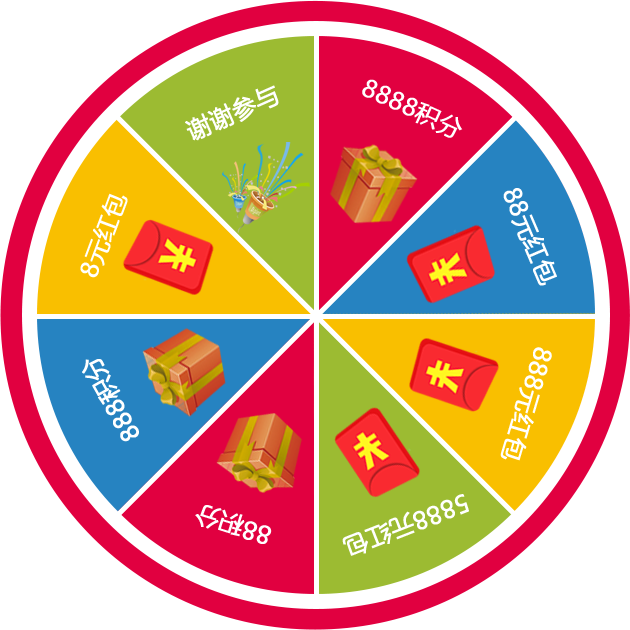
<style>
.page{position:relative;width:630px;height:630px;background:#ffffff}
.page>*{position:absolute;margin:0}
.t1{font:24px "MicrosoftYaHei";color:#ffffff;font-weight:bold}
</style>
<div class="page">
<p class="t1" style="left:185px;top:85px;width:94px;height:56px;rotate:-24deg">谢谢参与</p>
<p class="t1" style="left:362px;top:79px;width:101px;height:59px;rotate:25deg">8888积分</p>
<p class="t1" style="left:80px;top:193px;width:48px;height:85px;rotate:-70deg">8元红包</p>
<p class="t1" style="left:503px;top:188px;width:54px;height:98px;rotate:67deg">88元红包</p>
<p class="t1" style="left:500px;top:347px;width:52px;height:114px;rotate:106deg">888元红包</p>
<p class="t1" style="left:82px;top:359px;width:57px;height:83px;rotate:-119deg">888积分</p>
<p class="t1" style="left:342px;top:494px;width:127px;height:62px;rotate:159deg">5888元红包</p>
<p class="t1" style="left:195px;top:505px;width:77px;height:39px;rotate:-163deg">88积分</p>
</div>
